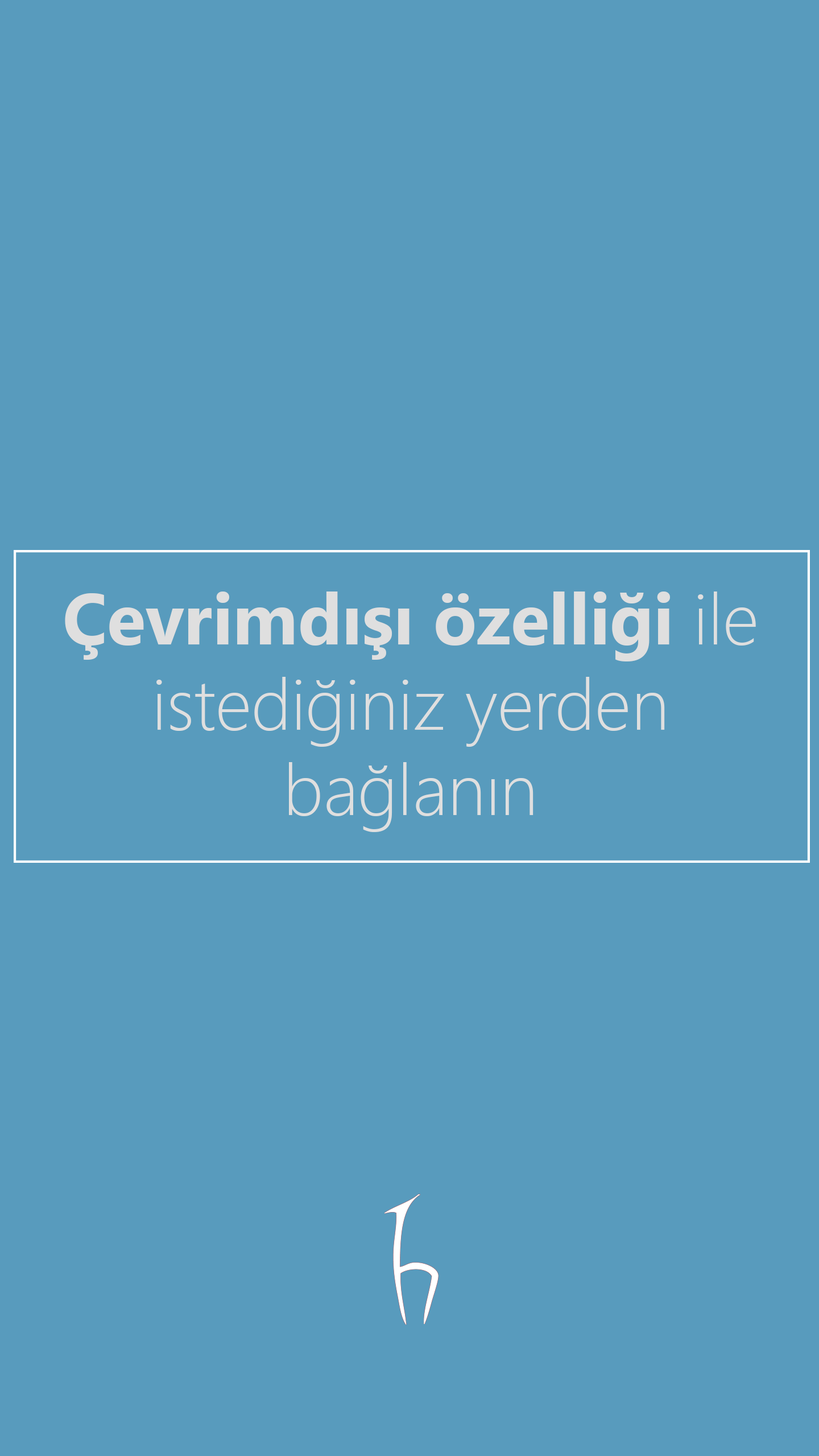
<style>
.page{position:relative;width:819px;height:1456px;background:#589bbd}
.page>*{position:absolute;margin:0}
.t1{font:71.1px "SegoeUI-Light";color:#dfdfdf}
.t2{font:71.1px "SegoeUI-Bold";color:#dfdfdf}
</style>
<div class="page">
<p class="t1" style="left:65px;top:591px;width:691px;height:241px;text-align:center"><span class="t2">Çevrimdışı özelliği </span>ile<br>istediğiniz yerden<br>bağlanın</p>
</div>
